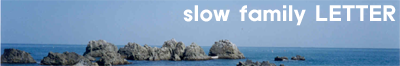
<style>
.page{position:relative;width:400px;height:66px}
.page>*{position:absolute;margin:0}
.t1{font:20px "ExpoB-HM";letter-spacing:0.025em;color:#ffffff}
</style>
<div class="page">
<p class="t1" style="left:183px;top:5px;width:213px;height:21px">slow family LETTER</p>
</div>
